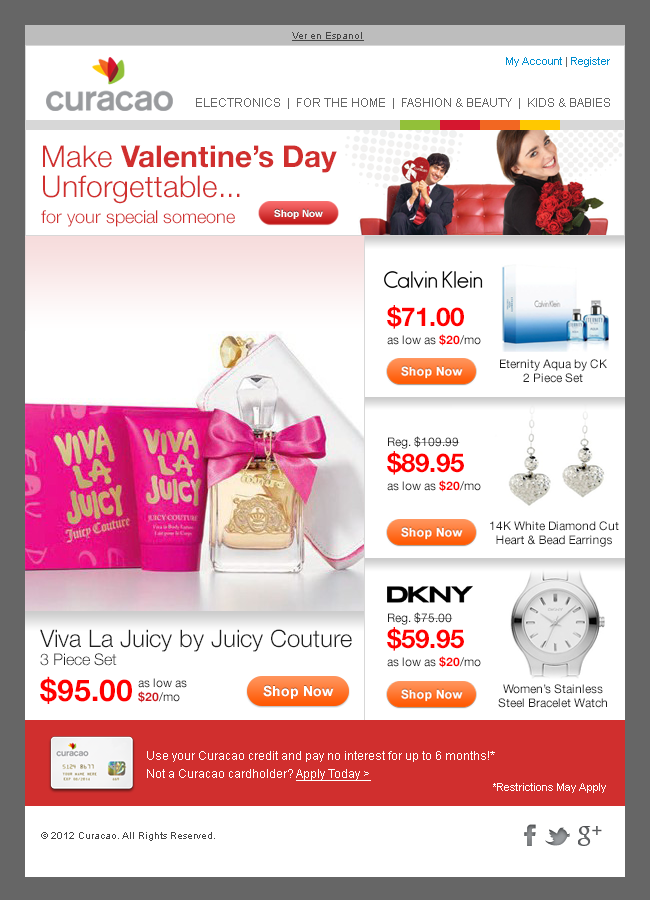
<style>
.page{position:relative;width:650px;height:900px;background:#ffffff}
.page>*{position:absolute;margin:0}
.t1{font:10px "ArialMT";color:#444444;text-decoration:underline}
.t2{font:11px "ArialMT";color:#008ecf}
.t3{font:11px "ArialMT";color:#666666}
.t4{font:12px "ArialMT";color:#666666}
.t5{font:18px/26px "HelveticaNeue-Light";color:#d02f2e}
.t6{font:30px/24px "HelveticaNeue-Light";color:#d02f2e}
.t7{font:30px/24px "HelveticaNeue-Bold";color:#d02f2e}
.t8{font:30px/30px "HelveticaNeue-Light";color:#d02f2e}
.t9{font:10px "Arial-BoldMT";color:#ffffff}
.t10{font:12px/18px "HelveticaNeue-Roman";color:#1e1e1e}
.t11{font:26px/26px "HelveticaNeue-Bold";color:#ff0000}
.t12{font:12px/18px "HelveticaNeue-Bold";color:#ff0000}
.t13{font:12px/14px "HelveticaNeue-Roman";color:#1e1e1e}
.t14{font:24px/18px "HelveticaNeue-Light";color:#1e1e1e}
.t15{font:16px/18px "HelveticaNeue-Light";color:#1e1e1e}
.t16{font:30px/36px "HelveticaNeue-Bold";color:#ff0000}
.t17{font:12px/14px "HelveticaNeue-Roman";color:#ce181e}
.t18{font:12px/14px "HelveticaNeue-Bold";color:#ce181e}
.t19{font:12px/18px "ArialMT";color:#ffffff}
.t20{font:12px/18px "ArialMT";color:#ffffff;text-decoration:underline}
.t21{font:11px "ArialMT";color:#ffffff}
.t22{font:10px "ArialMT";color:#444444}
</style>
<div class="page">
<p class="t1" style="left:292px;top:32px;width:72px;height:9px">Ver en Espanol</p>
<p class="t2" style="left:506px;top:57px;width:104px;height:10px">My Account<span class="t3"> | </span>Register</p>
<p class="t4" style="left:196px;top:98px;width:414px;height:11px">ELECTRONICS  |  FOR THE HOME  |  FASHION &amp; BEAUTY  |  KIDS &amp; BABIES</p>
<p class="t5" style="left:41px;top:145px;width:296px;height:82px"><span class="t6">Make </span><span class="t7">Valentine’s Day<br></span><span class="t8">Unforgettable...<br></span>for your special someone</p>
<p class="t9" style="left:274px;top:209px;width:49px;height:10px">Shop Now</p>
<p class="t10" style="left:387px;top:305px;width:94px;height:41px"><span class="t11">$71.00<br></span>as low as <span class="t12">$20</span>/mo</p>
<p class="t13" style="left:500px;top:359px;width:107px;height:24px;text-align:center">Eternity Aqua by CK<br>2 Piece Set</p>
<p class="t10" style="left:387px;top:436px;width:94px;height:56px">Reg. $109.99<br><span class="t11">$89.95<br></span>as low as <span class="t12">$20</span>/mo</p>
<p class="t13" style="left:490px;top:521px;width:129px;height:26px;text-align:center">14K White Diamond Cut<br>Heart &amp; Bead Earrings</p>
<p class="t10" style="left:387px;top:612px;width:94px;height:56px">Reg. $75.00<br><span class="t11">$59.95<br></span>as low as <span class="t12">$20</span>/mo</p>
<p class="t14" style="left:40px;top:629px;width:312px;height:75px">Viva La Juicy by Juicy Couture<br><span class="t15">3 Piece Set<br></span><span class="t16">$95.00</span></p>
<p class="t17" style="left:138px;top:678px;width:49px;height:25px">as low as<br><span class="t18">$20</span>/mo</p>
<p class="t13" style="left:498px;top:684px;width:109px;height:24px;text-align:center">Women’s Stainless<br>Steel Bracelet Watch</p>
<p class="t19" style="left:147px;top:751px;width:348px;height:30px">Use your Curacao credit and pay no interest for up to 6 months!*<br>Not a Curacao cardholder? <span class="t20">Apply Today &gt;</span></p>
<p class="t21" style="left:493px;top:783px;width:113px;height:10px">*Restrictions May Apply</p>
<p class="t22" style="left:41px;top:832px;width:174px;height:9px">© 2012 Curacao. All Rights Reserved.</p>
</div>
